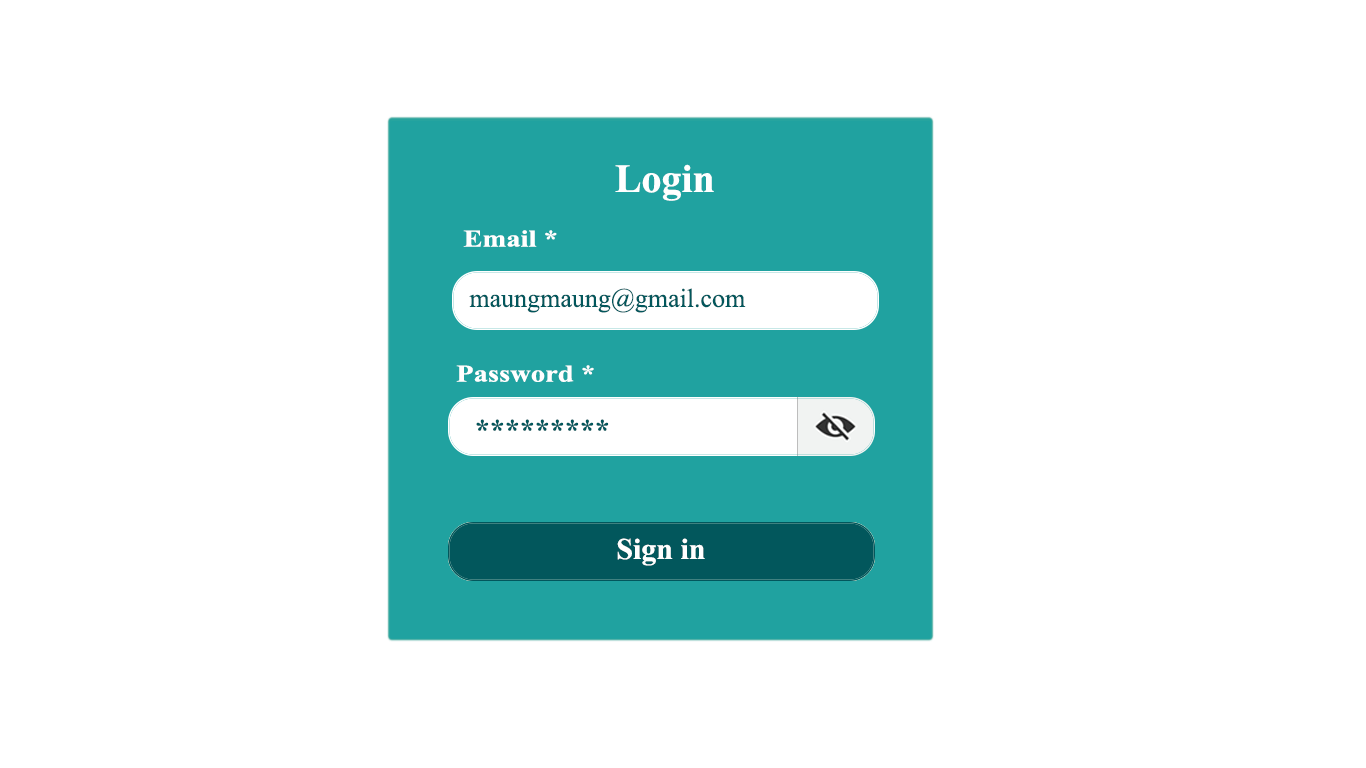
<style>
.page{position:relative;width:1366px;height:768px;background:#ffffff}
.page>*{position:absolute;margin:0}
.t1{font:40px "TimesNewRomanPS-BoldMT";color:#ffffff}
.t2{font:24px "TimesNewRomanPS-BoldMT";color:#ffffff;scale:1.19 1}
.t3{font:26px "TimesNewRomanPSMT";color:#02575c}
.t4{font:30px "TimesNewRomanPS-BoldMT";color:#02575c}
.t5{font:30px "TimesNewRomanPS-BoldMT";color:#ffffff}
</style>
<div class="page">
<p class="t1" style="left:615px;top:164px;width:99px;height:37px">Login</p>
<p class="t2" style="left:463px;top:230px;width:94px;height:17px">Email *</p>
<p class="t3" style="left:469px;top:288px;width:277px;height:25px">maungmaung@gmail.com</p>
<p class="t2" style="left:456px;top:365px;width:138px;height:17px">Password *</p>
<p class="t4" style="left:476px;top:419px;width:133px;height:12px">*********</p>
<p class="t5" style="left:617px;top:538px;width:88px;height:28px">Sign in</p>
</div>
